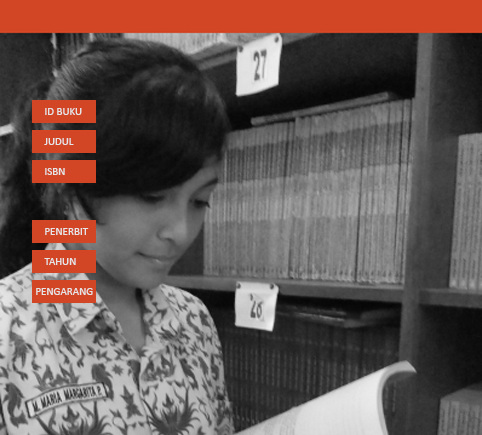
<style>
.page{position:relative;width:482px;height:435px}
.page>*{position:absolute;margin:0}
.t1{font:11px "Calibri";color:#e5e5e5}
</style>
<div class="page">
<p class="t1" style="left:45px;top:108px;width:37px;height:7px">ID BUKU</p>
<p class="t1" style="left:44px;top:138px;width:30px;height:7px">JUDUL</p>
<p class="t1" style="left:45px;top:168px;width:20px;height:7px">ISBN</p>
<p class="t1" style="left:45px;top:228px;width:44px;height:7px">PENERBIT</p>
<p class="t1" style="left:44px;top:258px;width:32px;height:7px">TAHUN</p>
<p class="t1" style="left:36px;top:288px;width:57px;height:7px">PENGARANG</p>
</div>
